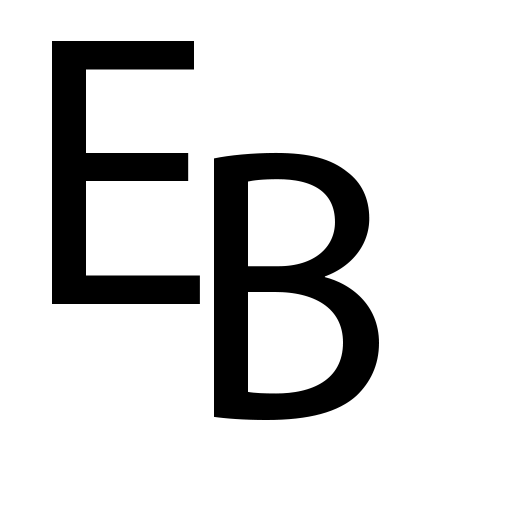
<style>
.page{position:relative;width:512px;height:512px;background:#ffffff}
.page>*{position:absolute;margin:0}
.t1{font:390px "MyriadPro-Regular";color:#000000}
</style>
<div class="page">
<p class="t1" style="left:52px;top:41px;width:148px;height:263px">E</p>
<p class="t1" style="left:214px;top:152px;width:165px;height:268px">B</p>
</div>
